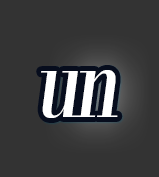
<style>
.page{position:relative;width:159px;height:177px;background:#333333}
.page>*{position:absolute;margin:0}
.t1{font:96px "KochoStd-Heavy";letter-spacing:-0.08em;color:#ffffff;font-style:italic;scale:0.75 1}
</style>
<div class="page">
<p class="t1" style="left:41px;top:70px;width:77px;height:48px">un</p>
<p class="t1" style="left:74px;top:70px;width:44px;height:47px">n</p>
</div>
